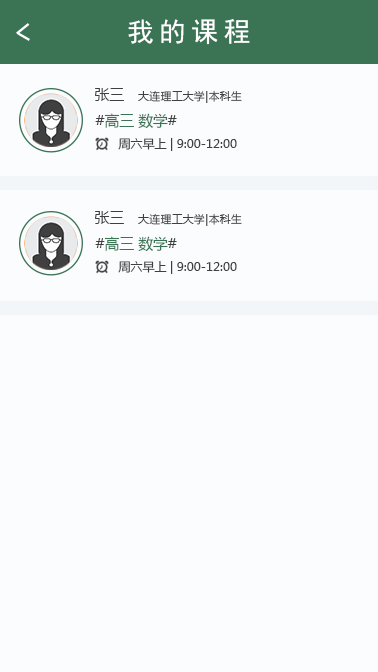
<style>
.page{position:relative;width:378px;height:672px;background:#fbfcfd}
.page>*{position:absolute;margin:0}
.t1{font:26.7px "SimHei";letter-spacing:0.2em;color:#ffffff}
.t2{font:10.7px "MicrosoftYaHei";letter-spacing:0.05em;color:#3f3f3f}
.t3{font:14.7px "MicrosoftYaHei";color:#3f3f3f}
.t4{font:14.7px "MicrosoftYaHei";color:#3a7455}
.t5{font:12px "MicrosoftYaHei";color:#3f3f3f}
</style>
<div class="page">
<p class="t1" style="left:128px;top:19px;width:122px;height:26px">我的课程</p>
<p class="t2" style="left:95px;top:88px;width:147px;height:15px"><span class="t3">张三   </span>大连理工大学|本科生</p>
<p class="t4" style="left:95px;top:113px;width:82px;height:16px"><span class="t3">#</span>高三 数学<span class="t3">#</span></p>
<p class="t5" style="left:118px;top:138px;width:119px;height:13px">周六早上 | 9:00-12:00</p>
<p class="t2" style="left:95px;top:211px;width:147px;height:15px"><span class="t3">张三   </span>大连理工大学|本科生</p>
<p class="t4" style="left:95px;top:236px;width:82px;height:16px"><span class="t3">#</span>高三 数学<span class="t3">#</span></p>
<p class="t5" style="left:118px;top:261px;width:119px;height:13px">周六早上 | 9:00-12:00</p>
</div>
